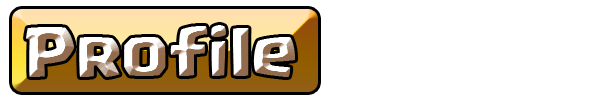
<style>
.page{position:relative;width:600px;height:100px;background:#ffffff}
.page>*{position:absolute;margin:0}
.t1{font:52px "Supercell-Magic"}
</style>
<div class="page">
<p class="t1" style="left:26px;top:25px;width:269px;height:52px">Profile</p>
</div>
